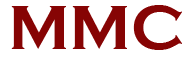
<style>
.page{position:relative;width:193px;height:57px;background:#ffffff}
.page>*{position:absolute;margin:0}
.t1{font:63.6px "CopperplateGothic-Bold";color:#860404}
</style>
<div class="page">
<p class="t1" style="left:11px;top:5px;width:171px;height:45px">MMC</p>
</div>
